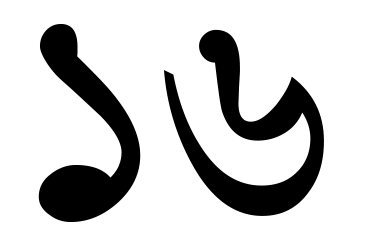
<style>
.page{position:relative;width:388px;height:246px;background:#ffffff}
.page>*{position:absolute;margin:0}
.t1{font:300px "KalpurushANSI";color:#000000}
</style>
<div class="page">
<p class="t1" style="left:38px;top:24px;width:286px;height:198px">16</p>
</div>
